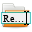
<style>
.page{position:relative;width:32px;height:32px;background:#ffffff}
.page>*{position:absolute;margin:0}
.t1{font:9px "TimesNewRomanPSMT";letter-spacing:0.105em;color:#000000}
.t2{font:9px "TimesNewRomanPSMT";letter-spacing:0.005em;color:#000000}
</style>
<div class="page">
<p class="t1" style="left:3px;top:15px;width:21px;height:7px"><span class="t2"> </span>Re...</p>
</div>
